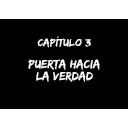
<style>
.page{position:relative;width:128px;height:128px;background:#000000}
.page>*{position:absolute;margin:0}
.t1{font:10.7px "EdoSZ";color:#ffffff;scale:1.05 1}
.t2{font:12.3px/11.8px "EdoSZ";color:#ffffff}
</style>
<div class="page">
<p class="t1" style="left:37px;top:36px;width:54px;height:12px">Capítulo 3</p>
<p class="t2" style="left:28px;top:59px;width:72px;height:23px;text-align:center">Puerta hacia<br>la verdad</p>
</div>
